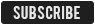
<style>
.page{position:relative;width:95px;height:25px;background:#1f1f1f}
.page>*{position:absolute;margin:0}
.t1{font:14px "Bebas";letter-spacing:0.025em;color:#e6e6e6}
</style>
<div class="page">
<p class="t1" style="left:13px;top:6px;width:67px;height:13px">subscribe</p>
</div>
